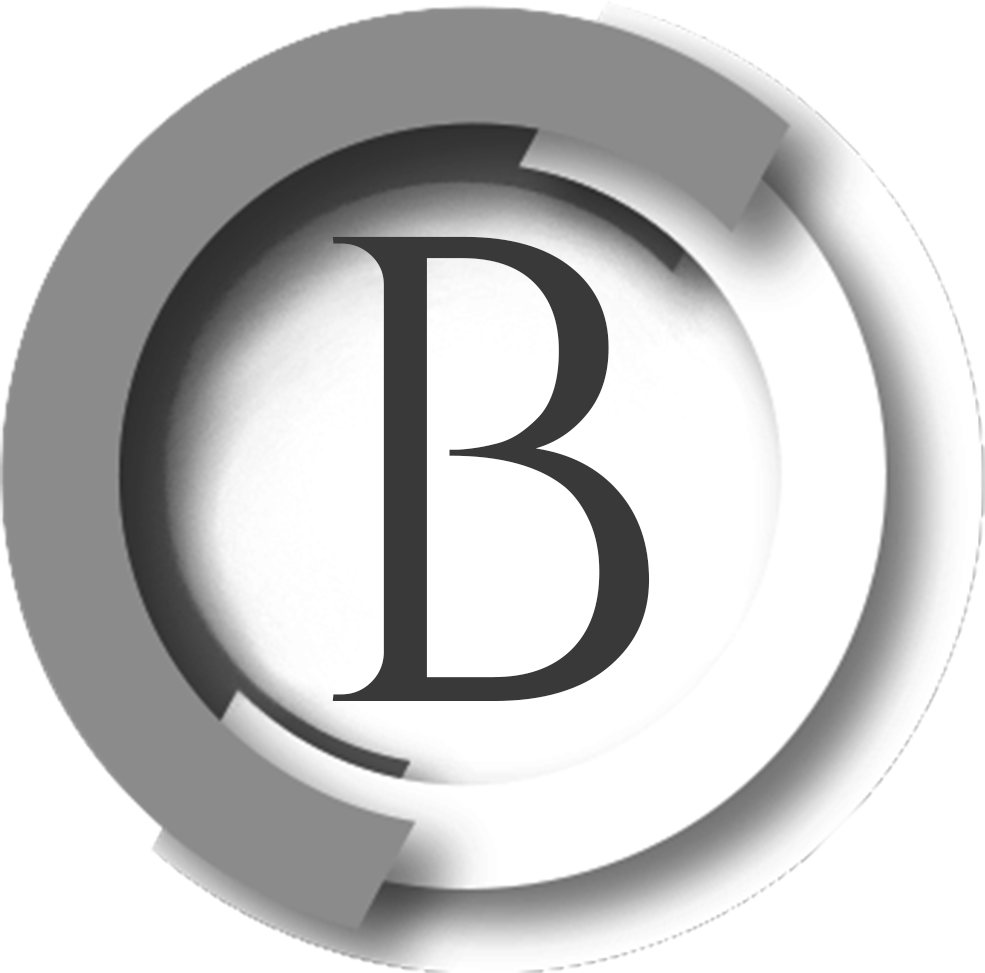
<style>
.page{position:relative;width:985px;height:973px;background:#ffffff}
.page>*{position:absolute;margin:0}
.t1{font:662.5px "Cinzel-Regular";color:#393939}
</style>
<div class="page">
<p class="t1" style="left:332px;top:236px;width:318px;height:465px">B</p>
</div>
